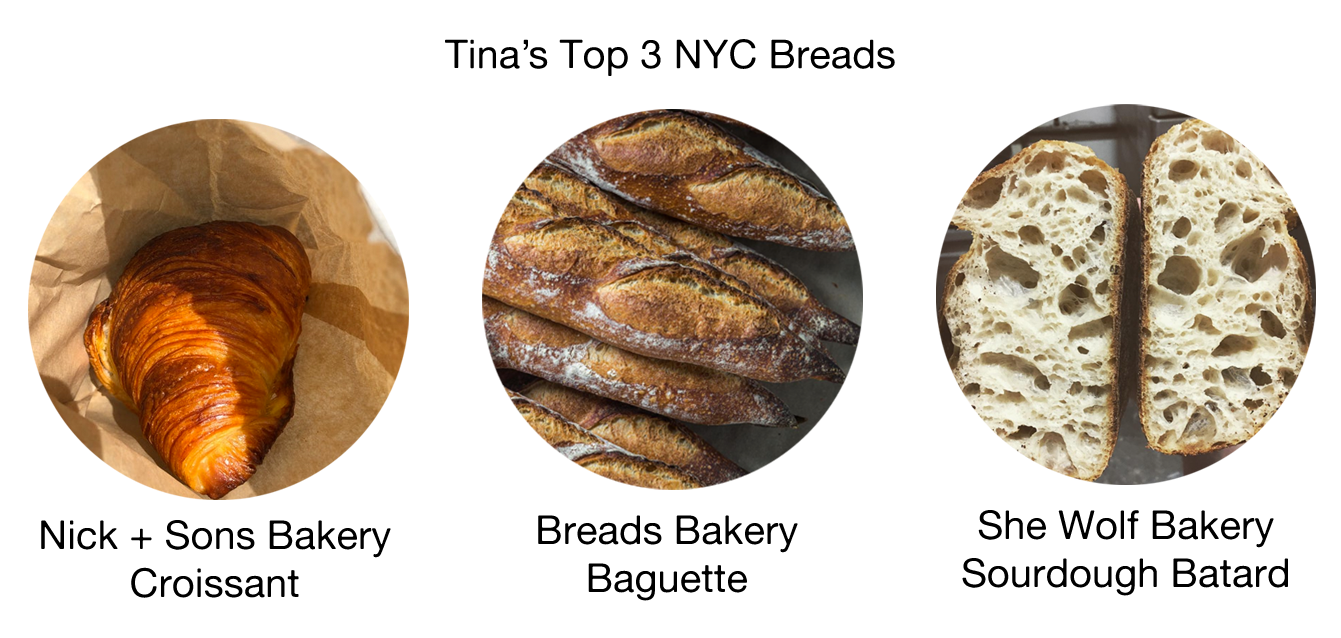
<style>
.page{position:relative;width:1341px;height:638px;background:#ffffff}
.page>*{position:absolute;margin:0}
.t1{font:40px "AlteHaasGrotesk";color:#000000}
</style>
<div class="page">
<p class="t1" style="left:445px;top:39px;width:450px;height:37px">Tina’s Top 3 NYC Breads</p>
<p class="t1" style="left:962px;top:510px;width:326px;height:86px;text-align:center">She Wolf Bakery<br>Sourdough Batard</p>
<p class="t1" style="left:41px;top:520px;width:350px;height:78px;text-align:center">Nick + Sons Bakery<br>Croissant</p>
<p class="t1" style="left:538px;top:515px;width:260px;height:86px;text-align:center">Breads Bakery <br>Baguette</p>
</div>
